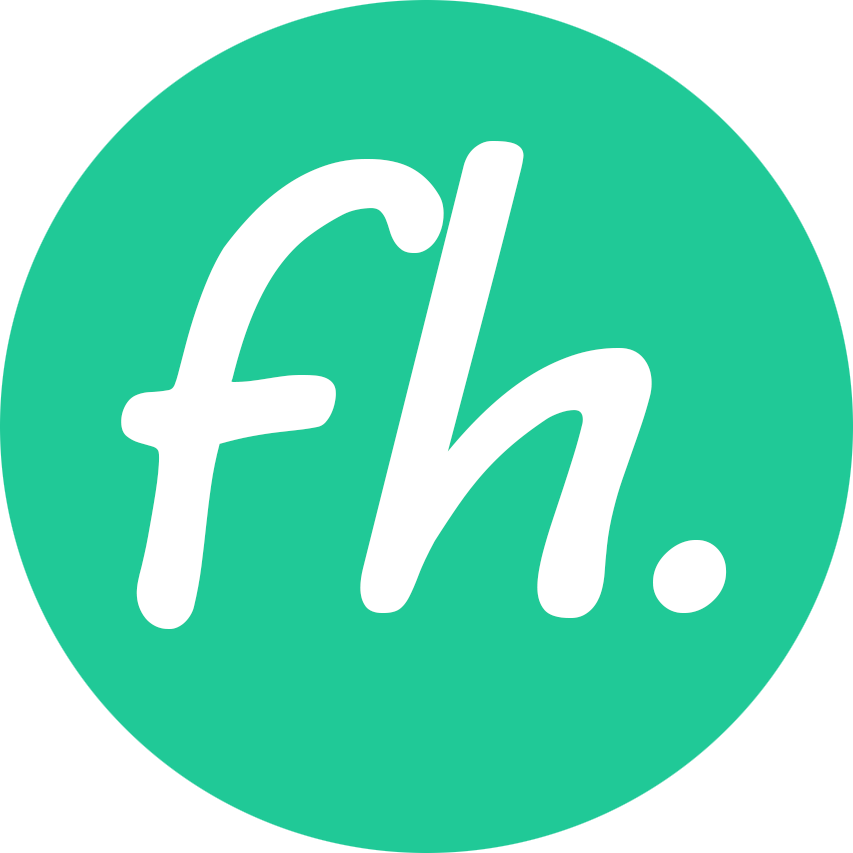
<style>
.page{position:relative;width:853px;height:853px;background:#20c997}
.page>*{position:absolute;margin:0}
.t1{font:625px "MVBoli";color:#ffffff}
.t2{font:500px "MVBoli";color:#ffffff}
</style>
<div class="page">
<p class="t1" style="left:121px;top:141px;width:531px;height:488px">fh</p>
<p class="t2" style="left:653px;top:540px;width:74px;height:73px">.</p>
</div>
